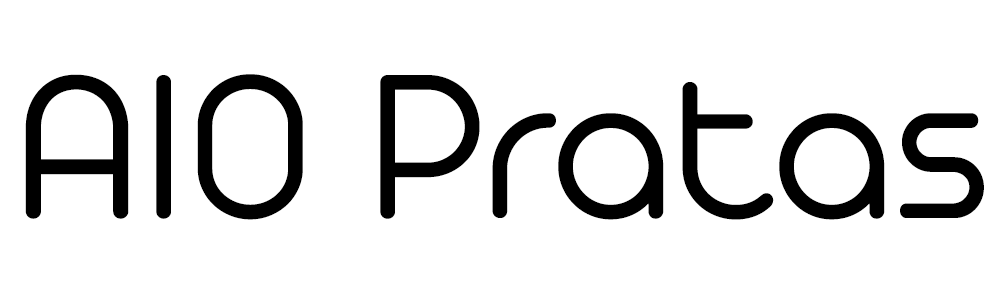
<style>
.page{position:relative;width:1000px;height:300px;background:#ffffff}
.page>*{position:absolute;margin:0}
.t1{font:222.2px "AristaProTrial-Light";color:#000000}
</style>
<div class="page">
<p class="t1" style="left:25px;top:74px;width:959px;height:146px">AIO Pratas</p>
</div>
